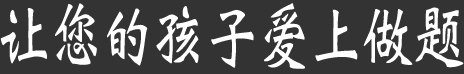
<style>
.page{position:relative;width:464px;height:74px;background:#333333}
.page>*{position:absolute;margin:0}
.t1{font:72.9px "Weibei-SC-Bold";color:#ffffff;scale:0.71 1}
</style>
<div class="page">
<p class="t1" style="left:0px;top:3px;width:464px;height:66px">让您的孩子爱上做题</p>
</div>
